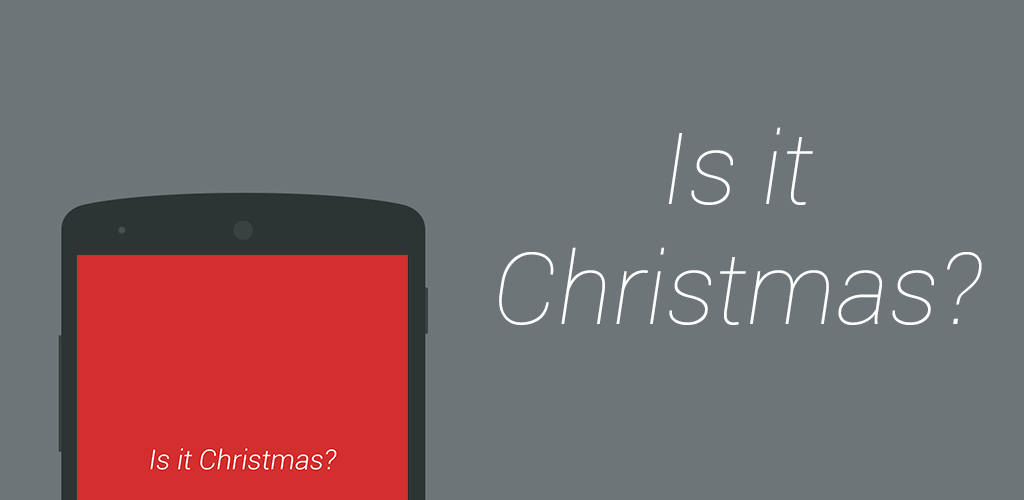
<style>
.page{position:relative;width:1024px;height:500px;background:#6d7579}
.page>*{position:absolute;margin:0}
.t1{font:100px "Roboto-ThinItalic";color:#ffffff}
</style>
<div class="page">
<p class="t1" style="left:499px;top:127px;width:483px;height:198px;text-align:center">Is it<br>Christmas?</p>
</div>
